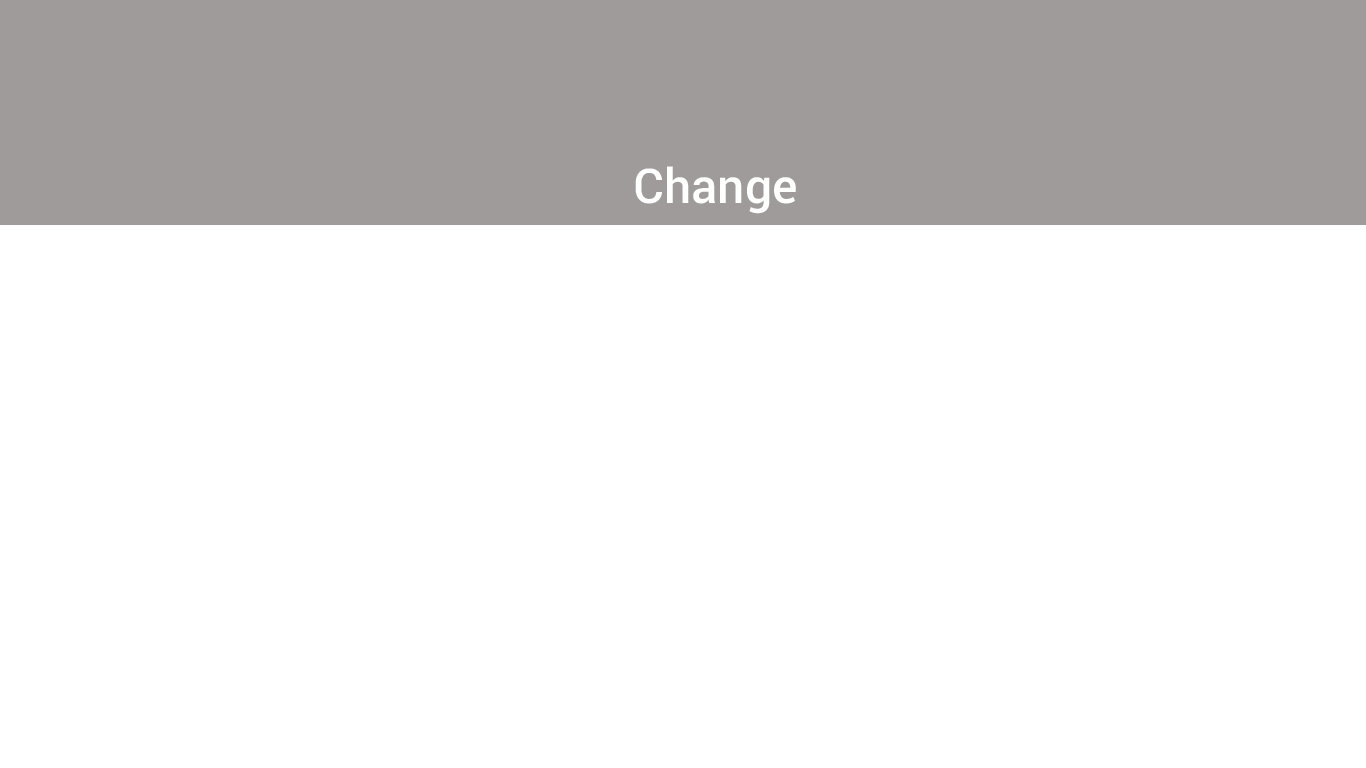
<style>
.page{position:relative;width:1366px;height:768px;background:#ffffff}
.page>*{position:absolute;margin:0}
.t1{font:48px "Roboto-Medium";color:#ffffff}
</style>
<div class="page">
<p class="t1" style="left:635px;top:166px;width:161px;height:48px">Change</p>
</div>
